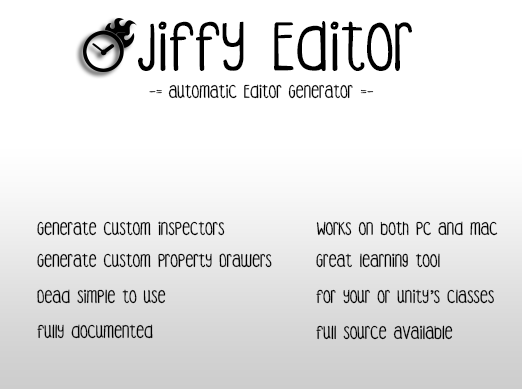
<style>
.page{position:relative;width:522px;height:389px;background:#ffffff}
.page>*{position:absolute;margin:0}
.t1{font:45px "DJBCoffeeShoppeEspresso";color:#000000}
.t2{font:12px "DJBCoffeeShoppeEspresso";color:#000000}
</style>
<div class="page">
<p class="t1" style="left:138px;top:21px;width:274px;height:50px">Jiffy Editor</p>
<p class="t2" style="left:149px;top:84px;width:225px;height:15px">-= Automatic Editor Generator =-</p>
<p class="t2" style="left:37px;top:221px;width:188px;height:15px">Generate custom Inspectors</p>
<p class="t2" style="left:316px;top:221px;width:182px;height:15px">Works on both PC and Mac</p>
<p class="t2" style="left:37px;top:253px;width:235px;height:15px">Generate custom Property Drawers</p>
<p class="t2" style="left:316px;top:253px;width:124px;height:15px">Great learning tool</p>
<p class="t2" style="left:37px;top:289px;width:129px;height:15px">Dead simple to use</p>
<p class="t2" style="left:316px;top:289px;width:178px;height:15px">for your or unity’s classes</p>
<p class="t2" style="left:37px;top:324px;width:116px;height:15px">Fully documented</p>
<p class="t2" style="left:316px;top:325px;width:137px;height:15px">Full source available</p>
</div>
